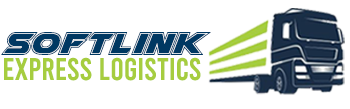
<style>
.page{position:relative;width:350px;height:109px;background:#ffffff}
.page>*{position:absolute;margin:0}
.t1{font:42.5px "AirstrikeAcademy";color:#003862}
.t2{font:31.1px "Bebas-Regular";color:#a6cd3f}
</style>
<div class="page">
<p class="t1" style="left:1px;top:32px;width:210px;height:23px">Softlink</p>
<p class="t2" style="left:4px;top:57px;width:197px;height:24px">Express Logistics</p>
</div>
